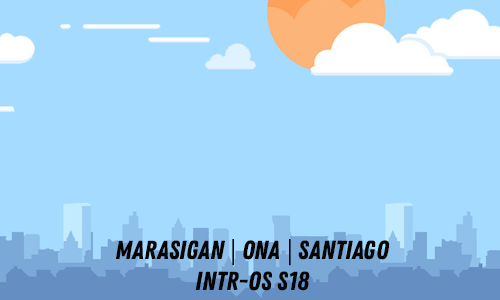
<style>
.page{position:relative;width:500px;height:300px;background:#a5dbff}
.page>*{position:absolute;margin:0}
.t1{font:26.2px "ZingRustDemo-Base";color:#050505}
.t2{font:26.2px "MyriadPro-Regular";color:#050505}
</style>
<div class="page">
<p class="t1" style="left:116px;top:239px;width:274px;height:52px;text-align:center">MARASIGAN <span class="t2">| </span>ONA <span class="t2">|</span> SANTIAGO<br>INTR-OS S18</p>
</div>
